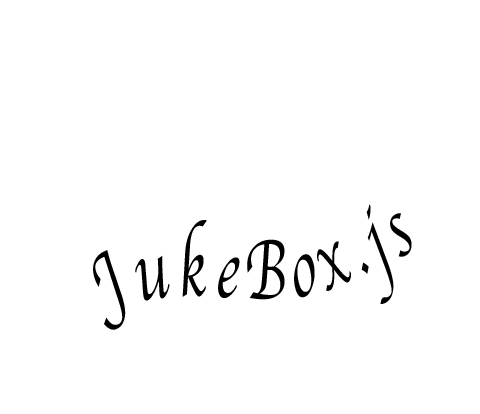
<style>
.page{position:relative;width:480px;height:414px;background:#ffffff}
.page>*{position:absolute;margin:0}
.t1{font:87.4px "Apple-Chancery";letter-spacing:0.14em;color:#000000;scale:0.69 1}
</style>
<div class="page">
<p class="t1" style="left:93px;top:204px;width:319px;height:126px">JukeBox.js</p>
</div>
